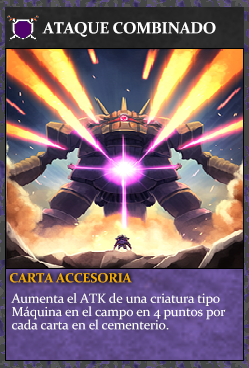
<style>
.page{position:relative;width:249px;height:368px}
.page>*{position:absolute;margin:0}
.t1{font:16px "Constantia-Bold";letter-spacing:-0.02em;color:#ffffff}
.t2{font:13.3px "Constantia-Bold";letter-spacing:-0.02em;color:#f2ac05}
.t3{font:13.3px/13.3px "Constantia";letter-spacing:-0.02em;color:#ffffff}
</style>
<div class="page">
<p class="t1" style="left:42px;top:22px;width:174px;height:15px">ATAQUE COMBINADO</p>
<p class="t2" style="left:10px;top:273px;width:122px;height:10px">CARTA ACCESORIA</p>
<p class="t3" style="left:11px;top:293px;width:215px;height:37px">Aumenta el ATK de una criatura tipo<br>Máquina en el campo en 4 puntos por<br>cada carta en el cementerio.</p>
</div>
